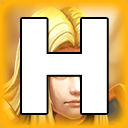
<style>
.page{position:relative;width:128px;height:128px;background:#ffffff}
.page>*{position:absolute;margin:0}
.t1{font:141.7px "FuturaPT-Bold";letter-spacing:0.06em;color:#ffffff}
</style>
<div class="page">
<p class="t1" style="left:22px;top:19px;width:85px;height:94px">H</p>
</div>
